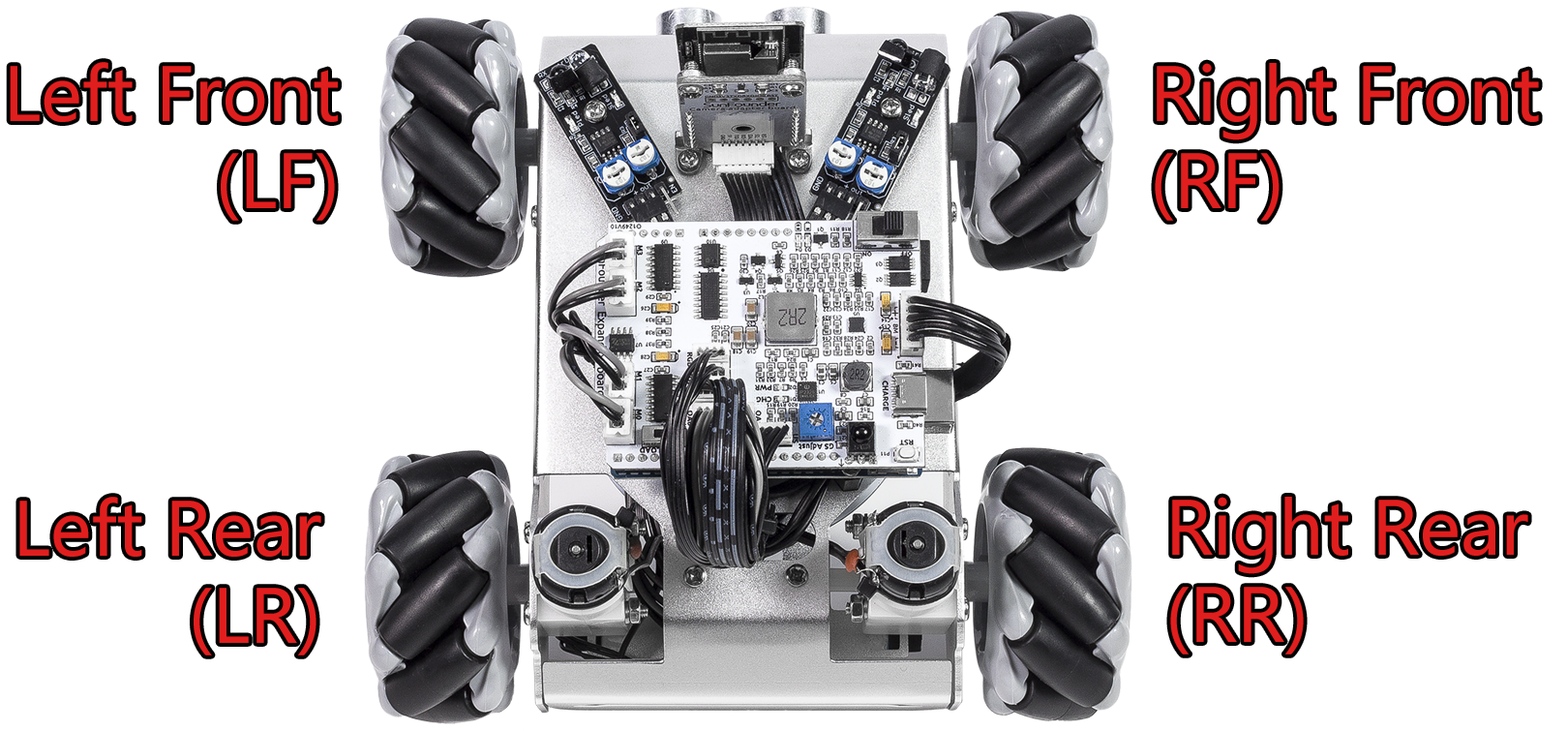
<style>
.page{position:relative;width:1568px;height:731px;background:#ffffff}
.page>*{position:absolute;margin:0}
.t1{font:72.6px "MicrosoftYaHeiUI";color:#e11e1e}
</style>
<div class="page">
<p class="t1" style="left:10px;top:62px;width:328px;height:159px;text-align:right">Left Front<br>(LF)</p>
<p class="t1" style="left:1155px;top:63px;width:384px;height:158px">Right Front<br>(RF)</p>
<p class="t1" style="left:19px;top:497px;width:302px;height:158px;text-align:right">Left Rear<br>(LR)</p>
<p class="t1" style="left:1170px;top:497px;width:358px;height:157px">Right Rear<br>(RR)</p>
</div>
